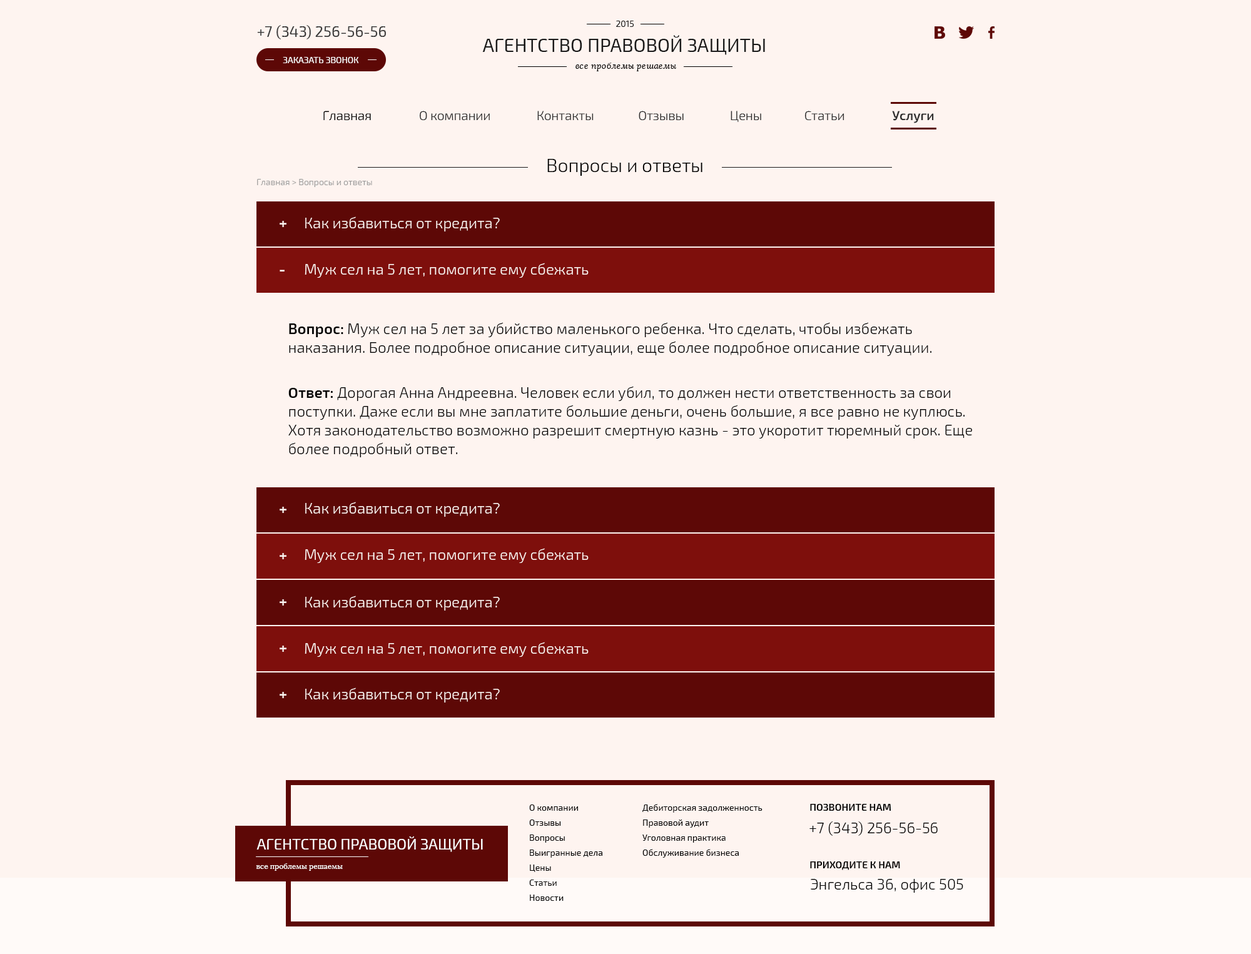
<style>
.page{position:relative;width:1251px;height:954px;background:#fef4f0}
.page>*{position:absolute;margin:0}
.t1{font:15px "Exo2-Regular";color:#3a3a3a}
.t2{font:8.8px "Exo2-Regular";color:#1a1a1a;text-transform:uppercase}
.t3{font:18.8px "Exo2-Regular";color:#1a1a1a;text-transform:uppercase}
.t4{font:8.8px "Exo2-Regular";color:#ffffff;text-transform:uppercase}
.t5{font:8.8px "Lora-Italic";color:#000000}
.t6{font:12.5px "Exo2-Light";color:#000000}
.t7{font:12.5px "Exo2-Light";color:#2f2f2f}
.t8{font:12.5px "Exo2-SemiBold";color:#2f2f2f}
.t9{font:18.7px "Exo2-Light";color:#000000}
.t10{font:8.8px "Exo2-Light";color:#979797}
.t11{font:15px "Exo2-SemiBold";color:#fef4f0}
.t12{font:15px "Exo2-Light";color:#fef4f0}
.t13{font:15px/18.8px "Exo2-Light";color:#010101}
.t14{font:15px/18.8px "Exo2-SemiBold";color:#010101}
.t15{font:8.8px/15px "Exo2-Regular";color:#000000}
.t16{font:10px "Exo2-SemiBold";color:#000000;text-transform:uppercase}
.t17{font:15px "Exo2-Light";color:#000000}
.t18{font:15px "Exo2-Regular";color:#ffffff;text-transform:uppercase}
.t19{font:7.5px "Lora-Regular";color:#ffffff}
</style>
<div class="page">
<p class="t1" style="left:257px;top:25px;width:129px;height:14px">+7 (343) 256-56-56</p>
<p class="t2" style="left:616px;top:21px;width:18px;height:6px">2015</p>
<p class="t3" style="left:482px;top:35px;width:283px;height:20px">Агентство правовой защиты</p>
<p class="t4" style="left:283px;top:57px;width:76px;height:6px">Заказать звонок</p>
<p class="t5" style="left:575px;top:63px;width:102px;height:8px">все проблемы решаемы</p>
<p class="t6" style="left:323px;top:111px;width:48px;height:9px">Главная</p>
<p class="t7" style="left:420px;top:111px;width:70px;height:9px">О компании</p>
<p class="t7" style="left:537px;top:111px;width:56px;height:9px">Контакты</p>
<p class="t7" style="left:638px;top:111px;width:45px;height:9px">Отзывы</p>
<p class="t7" style="left:730px;top:111px;width:31px;height:11px">Цены</p>
<p class="t7" style="left:805px;top:111px;width:39px;height:9px">Статьи</p>
<p class="t8" style="left:892px;top:111px;width:42px;height:12px">Услуги</p>
<p class="t9" style="left:547px;top:159px;width:155px;height:17px">Вопросы и ответы</p>
<p class="t10" style="left:257px;top:179px;width:115px;height:8px">Главная &gt; Вопросы и ответы</p>
<p class="t11" style="left:279px;top:221px;width:7px;height:6px">+</p>
<p class="t12" style="left:305px;top:216px;width:195px;height:15px">Как избавиться от кредита?</p>
<p class="t11" style="left:279px;top:269px;width:5px;height:2px">-</p>
<p class="t12" style="left:305px;top:263px;width:283px;height:15px">Муж сел на 5 лет, помогите ему сбежать</p>
<p class="t13" style="left:289px;top:322px;width:643px;height:34px"><span class="t14">Вопрос: </span>Муж сел на 5 лет за убийство маленького ребенка. Что сделать, чтобы избежать<br>наказания. Более подробное описание ситуации, еще более подробное описание ситуации.</p>
<p class="t13" style="left:288px;top:386px;width:684px;height:71px"><span class="t14">Ответ: </span>Дорогая Анна Андреевна. Человек если убил, то должен нести ответственность за свои<br>поступки. Даже если вы мне заплатите большие деньги, очень большие, я все равно не куплюсь.<br>Хотя законодательство возможно разрешит смертную казнь - это укоротит тюремный срок. Еще<br>более подробный ответ.</p>
<p class="t11" style="left:279px;top:506px;width:7px;height:7px">+</p>
<p class="t12" style="left:305px;top:501px;width:195px;height:15px">Как избавиться от кредита?</p>
<p class="t11" style="left:279px;top:553px;width:7px;height:6px">+</p>
<p class="t12" style="left:305px;top:548px;width:283px;height:15px">Муж сел на 5 лет, помогите ему сбежать</p>
<p class="t11" style="left:279px;top:599px;width:7px;height:6px">+</p>
<p class="t12" style="left:305px;top:595px;width:195px;height:15px">Как избавиться от кредита?</p>
<p class="t12" style="left:305px;top:642px;width:283px;height:15px">Муж сел на 5 лет, помогите ему сбежать</p>
<p class="t11" style="left:279px;top:645px;width:7px;height:7px">+</p>
<p class="t12" style="left:305px;top:687px;width:195px;height:15px">Как избавиться от кредита?</p>
<p class="t11" style="left:279px;top:692px;width:7px;height:6px">+</p>
<p class="t15" style="left:529px;top:804px;width:73px;height:96px">О компании<br>Отзывы<br>Вопросы<br>Выигранные дела<br>Цены<br>Статьи<br>Новости</p>
<p class="t15" style="left:642px;top:803px;width:120px;height:54px">Дебиторская задолженность<br>Правовой аудит<br>Уголовная практика<br>Обслуживание бизнеса</p>
<p class="t16" style="left:810px;top:803px;width:81px;height:7px">Позвоните нам</p>
<p class="t17" style="left:809px;top:821px;width:128px;height:14px">+7 (343) 256-56-56</p>
<p class="t18" style="left:256px;top:836px;width:227px;height:16px">Агентство правовой защиты</p>
<p class="t19" style="left:256px;top:863px;width:87px;height:7px">все проблемы решаемы</p>
<p class="t16" style="left:810px;top:861px;width:90px;height:9px">приходите к нам</p>
<p class="t17" style="left:810px;top:879px;width:153px;height:13px">Энгельса 36, офис 505</p>
</div>
